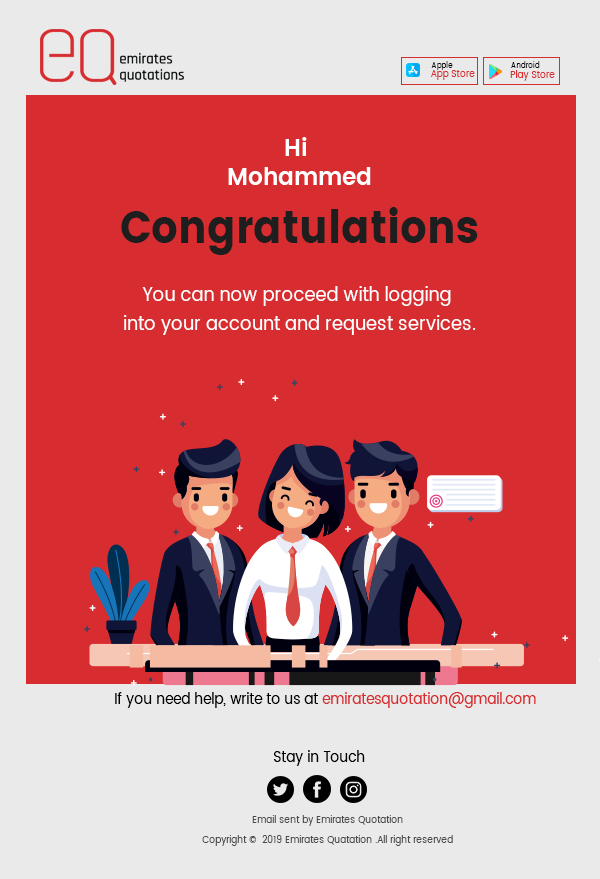
<style>
.page{position:relative;width:600px;height:879px;background:#d72d30}
.page>*{position:absolute;margin:0}
.t1{font:8px "Poppins-Regular";color:#000000;scale:0.91 1}
.t2{font:10px "Poppins-Regular";color:#d72d30;scale:0.91 1}
.t3{font:20px/29px "Poppins-Regular";color:#ffffff;scale:0.91 1}
.t4{font:25px/29px "Poppins-SemiBold";color:#ffffff;scale:0.91 1}
.t5{font:45px/29px "Poppins";color:#1e1e1e;scale:0.91 1}
.t6{font:15px "Poppins-Regular";color:#000000;scale:0.91 1}
.t7{font:15px "Poppins-Regular";color:#d72d30;scale:0.91 1}
.t8{font:10px/20px "Poppins-Regular";color:#4b4b4b;scale:0.91 1}
</style>
<div class="page">
<p class="t1" style="left:431px;top:61px;width:22px;height:9px">Apple</p>
<p class="t1" style="left:511px;top:61px;width:29px;height:7px">Android</p>
<p class="t2" style="left:431px;top:70px;width:44px;height:10px">App Store</p>
<p class="t2" style="left:510px;top:70px;width:45px;height:11px">Play Store</p>
<p class="t3" style="left:121px;top:137px;width:357px;height:198px;text-align:center"><span class="t4">Hi <br>Mohammed<br><br></span><span class="t5">Congratulations<br><br></span>You can now proceed with logging <br>into your account and request services.</p>
<p class="t6" style="left:115px;top:692px;width:421px;height:16px">If you need help, write to us at<span class="t7"> emiratesquotation@gmail.com</span></p>
<p class="t6" style="left:274px;top:750px;width:91px;height:16px">Stay in Touch</p>
<p class="t8" style="left:202px;top:815px;width:251px;height:31px;text-align:center">Email sent by Emirates Quotation<br>Copyright ©  2019 Emirates Quatation .All right reserved</p>
</div>
